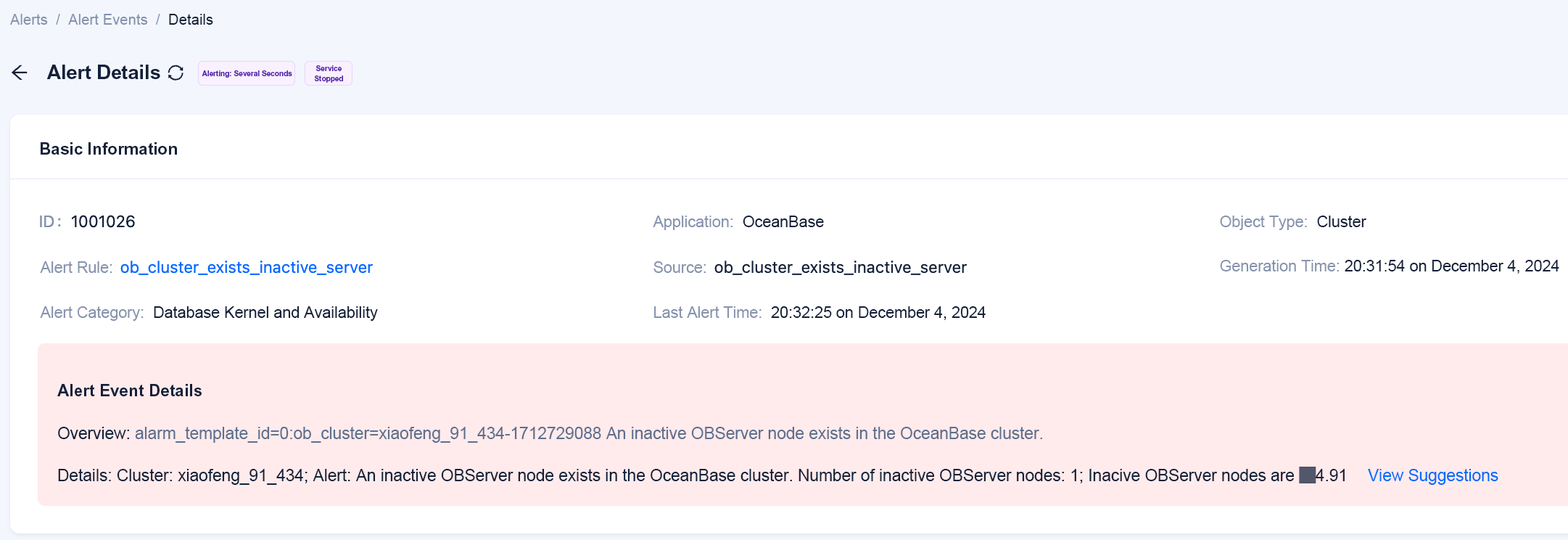
<style>
.page{position:relative;width:1568px;height:540px;background:#ffffff}
.page>*{position:absolute;margin:0}
.t1{font:14.7px "ArialMT";color:#8592ad}
.t2{font:14.7px "ArialMT";color:#132039}
.t3{font:19.5px "Arial-BoldMT";color:#132039}
.t4{font:7.3px/10.2px "Arial-BoldMT";color:#541dab}
.t5{font:7.3px "Arial-BoldMT";color:#541dab}
.t6{font:16.4px "Arial-BoldMT";color:#132039}
.t7{font:15.6px "ArialMT";color:#8794ae}
.t8{font:15.6px "ArialMT";color:#132039}
.t9{font:16.4px "ArialMT";color:#606f8d}
.t10{font:16.4px "ArialMT";color:#132039}
.t11{font:16.4px "ArialMT";color:#006aff}
</style>
<div class="page">
<p class="t1" style="left:10px;top:14px;width:203px;height:11px">Alerts  /  Alert Events  /  <span class="t2">Details</span></p>
<p class="t3" style="left:46px;top:65px;width:114px;height:14px">Alert Details</p>
<p class="t4" style="left:314px;top:65px;width:29px;height:18px;text-align:center">Service<br>Stopped</p>
<p class="t5" style="left:202px;top:70px;width:90px;height:8px">Alerting: Several Seconds</p>
<p class="t6" style="left:41px;top:142px;width:136px;height:12px">Basic Information</p>
<p class="t7" style="left:653px;top:215px;width:171px;height:15px">Application:  <span class="t8">OceanBase</span></p>
<p class="t7" style="left:1220px;top:215px;width:146px;height:15px">Object Type:  <span class="t8">Cluster</span></p>
<p class="t7" style="left:40px;top:261px;width:72px;height:12px">Alert Rule:</p>
<p class="t7" style="left:653px;top:261px;width:53px;height:12px">Source:</p>
<p class="t8" style="left:1220px;top:260px;width:339px;height:13px"><span class="t7">Generation Time: </span>20:31:54 on December 4, 2024</p>
<p class="t8" style="left:40px;top:306px;width:338px;height:15px"><span class="t7">Alert Category:  </span>Database Kernel and Availability</p>
<p class="t8" style="left:654px;top:306px;width:332px;height:14px"><span class="t7">Last Alert Time:  </span>20:32:25 on December 4, 2024</p>
<p class="t6" style="left:57px;top:384px;width:145px;height:12px">Alert Event Details</p>
<p class="t9" style="left:58px;top:426px;width:984px;height:16px"><span class="t10">Overview: </span>alarm_template_id=0:ob_cluster=xiaofeng_91_434-1712729088 An inactive OBServer node exists in the OceanBase cluster.</p>
<p class="t10" style="left:58px;top:469px;width:1287px;height:15px">Details: Cluster: xiaofeng_91_434; Alert: An inactive OBServer node exists in the OceanBase cluster. Number of inactive OBServer nodes: 1; Inacive OBServer nodes are xx4.91</p>
<p class="t11" style="left:1368px;top:469px;width:130px;height:15px">View Suggestions</p>
</div>
